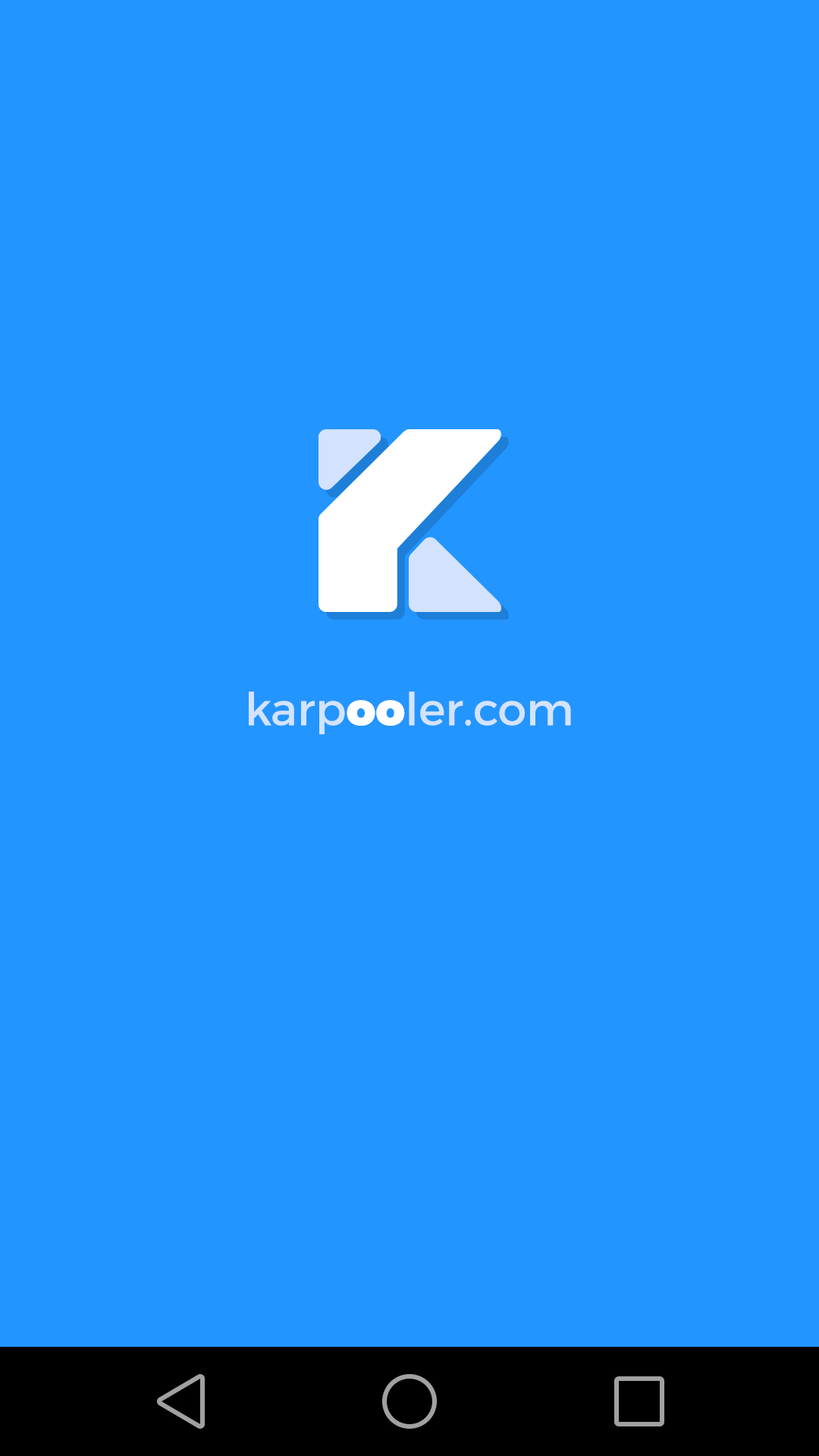
<style>
.page{position:relative;width:819px;height:1456px;background:#2395ff}
.page>*{position:absolute;margin:0}
.t1{font:45.5px "Montserrat-Regular";color:#d3e3ff}
.t2{font:45.5px "Montserrat-Black";color:#ffffff}
</style>
<div class="page">
<p class="t1" style="left:249px;top:692px;width:322px;height:43px">karp<span class="t2">oo</span>ler.com</p>
</div>
